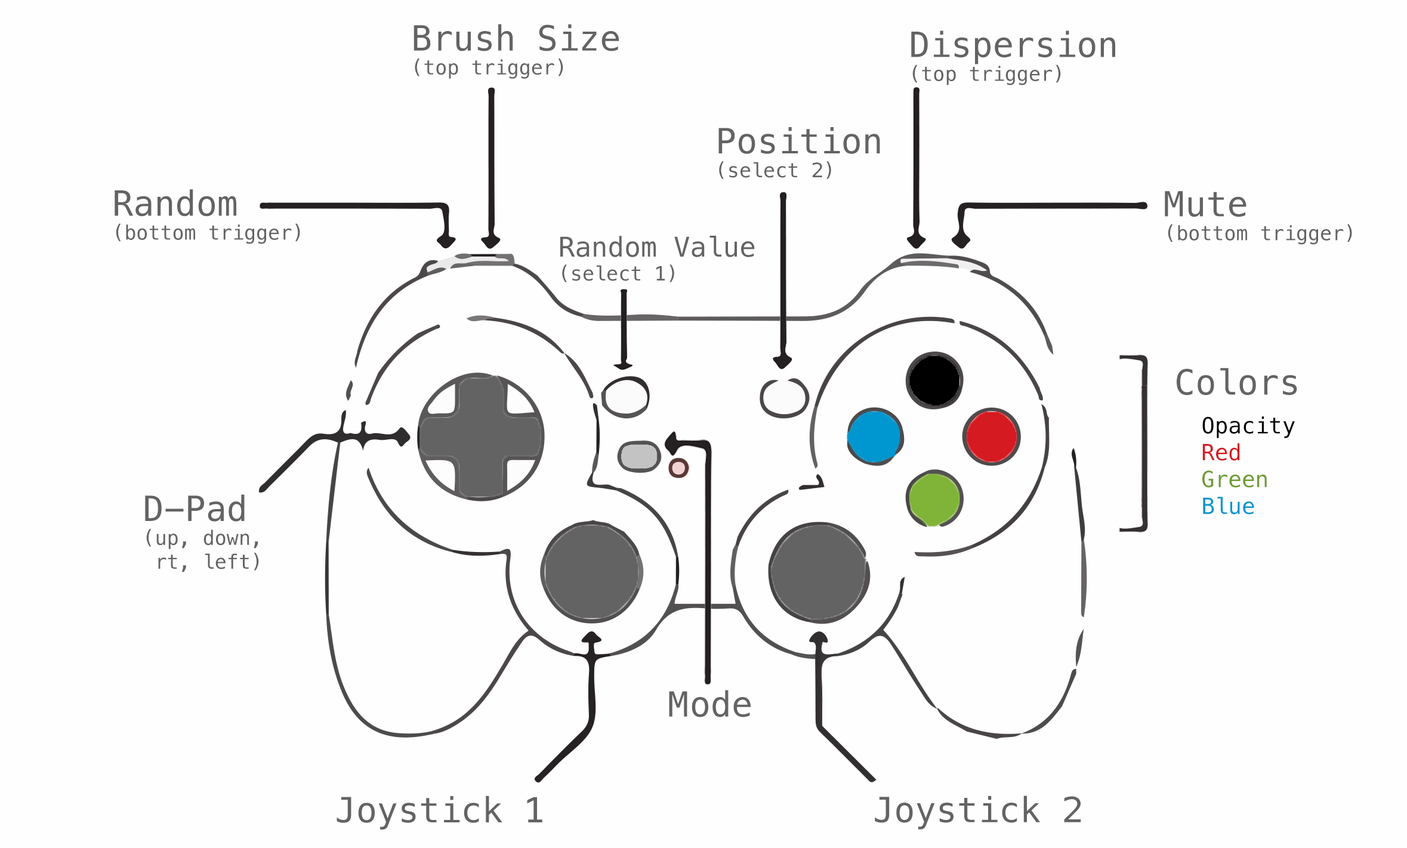
<style>
.page{position:relative;width:1407px;height:848px;background:#fefefe}
.page>*{position:absolute;margin:0}
.t1{font:19.9px "Menlo-Regular";color:#636363}
.t2{font:34.8px "Menlo-Regular";color:#636363}
.t3{font:27.3px "Menlo-Regular";color:#636363}
.t4{font:22.4px "Menlo-Regular";color:#000000}
.t5{font:22.4px "Menlo-Regular";color:#d51a21}
.t6{font:22.4px "Menlo-Regular";color:#6e9b31}
.t7{font:22.4px "Menlo-Regular";color:#0096cf}
</style>
<div class="page">
<p class="t1" style="left:413px;top:24px;width:206px;height:55px"><span class="t2">Brush Size<br></span>(top trigger)</p>
<p class="t1" style="left:911px;top:30px;width:204px;height:55px"><span class="t2">Dispersion<br></span>(top trigger)</p>
<p class="t1" style="left:718px;top:127px;width:162px;height:52px"><span class="t2">Position<br></span>(select 2)</p>
<p class="t1" style="left:115px;top:189px;width:185px;height:55px"><span class="t2">Random<br></span>(bottom trigger)</p>
<p class="t1" style="left:1164px;top:191px;width:188px;height:54px"><span class="t2">Mute<br></span>(bottom trigger)</p>
<p class="t3" style="left:560px;top:236px;width:195px;height:46px">Random Value<br><span class="t1">(select 1)</span></p>
<p class="t4" style="left:1176px;top:367px;width:121px;height:147px"><span class="t2">Colors<br><br>  </span>Opacity<br><span class="t5">  Red<br></span><span class="t6">  Green<br></span><span class="t7">  Blue</span></p>
<p class="t1" style="left:145px;top:494px;width:114px;height:78px"><span class="t2">D-Pad<br></span>(up, down,<br> rt, left)</p>
<p class="t2" style="left:669px;top:690px;width:81px;height:27px">Mode</p>
<p class="t2" style="left:336px;top:795px;width:206px;height:34px">Joystick 1</p>
<p class="t2" style="left:875px;top:795px;width:206px;height:34px">Joystick 2</p>
</div>
